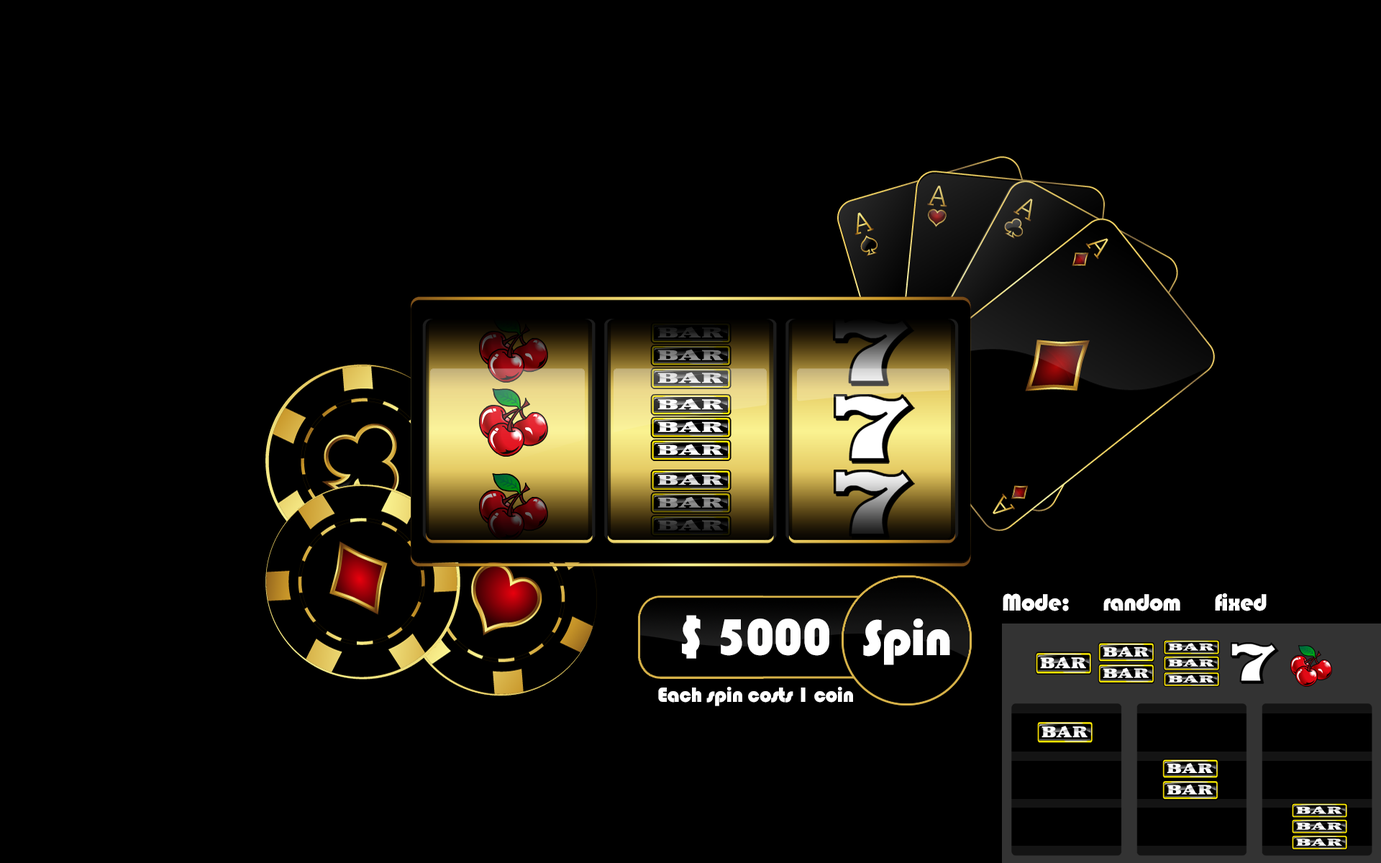
<style>
.page{position:relative;width:1381px;height:863px;background:#000000}
.page>*{position:absolute;margin:0}
.t1{font:24.4px "Bauhaus93";letter-spacing:-0.025em;color:#ffffff}
.t2{font:52.5px "Bauhaus93";letter-spacing:-0.025em;color:#ffffff}
.t3{font:51.9px "Bauhaus93";letter-spacing:-0.025em;color:#ffffff}
.t4{font:21.6px "Bauhaus93";letter-spacing:-0.025em;color:#ffffff}
</style>
<div class="page">
<p class="t1" style="left:1003px;top:594px;width:264px;height:17px">Mode:      random      fixed</p>
<p class="t2" style="left:682px;top:615px;width:147px;height:44px">$ 5000</p>
<p class="t3" style="left:863px;top:619px;width:87px;height:46px">Spin</p>
<p class="t4" style="left:658px;top:687px;width:195px;height:19px">Each spin costs 1 coin</p>
</div>
